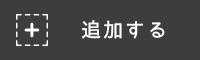
<style>
.page{position:relative;width:200px;height:60px;background:#3d3c3e}
.page>*{position:absolute;margin:0}
.t1{font:20px "BokutachinoGothic";letter-spacing:0.1em;color:#ffffff}
</style>
<div class="page">
<p class="t1" style="left:82px;top:20px;width:83px;height:19px">追加する</p>
</div>
